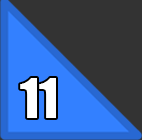
<style>
.page{position:relative;width:142px;height:140px;background:#333333}
.page>*{position:absolute;margin:0}
.t1{font:50px "Impact";color:#ffffff}
</style>
<div class="page">
<p class="t1" style="left:20px;top:78px;width:36px;height:40px">11</p>
</div>
